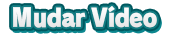
<style>
.page{position:relative;width:170px;height:38px;background:#ffffff}
.page>*{position:absolute;margin:0}
.t1{font:25.2px "RodinPro-UB";letter-spacing:-0.039em;color:#f1f1f2;scale:0.88 1}
</style>
<div class="page">
<p class="t1" style="left:13px;top:6px;width:144px;height:22px">Mudar Vídeo</p>
</div>
